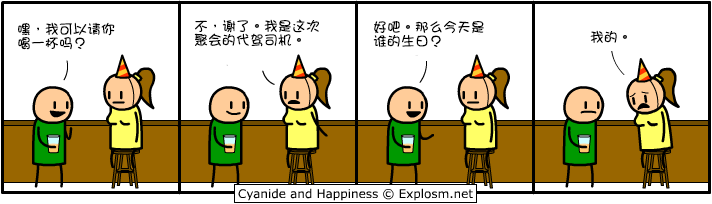
<style>
.page{position:relative;width:712px;height:204px;background:#ffffff}
.page>*{position:absolute;margin:0}
.t1{font:14px/14px "DFGirl";color:#000000}
.t2{font:14px "DFGirl";color:#000000}
</style>
<div class="page">
<p class="t1" style="left:18px;top:22px;width:97px;height:28px">嘿，我可以请你<br>喝一杯吗？</p>
<p class="t1" style="left:194px;top:19px;width:125px;height:28px">不，谢了。我是这次<br>聚会的代驾司机。</p>
<p class="t1" style="left:373px;top:21px;width:111px;height:26px">好吧。那么今天是<br>谁的生日？</p>
<p class="t2" style="left:590px;top:30px;width:37px;height:13px">我的。</p>
</div>
